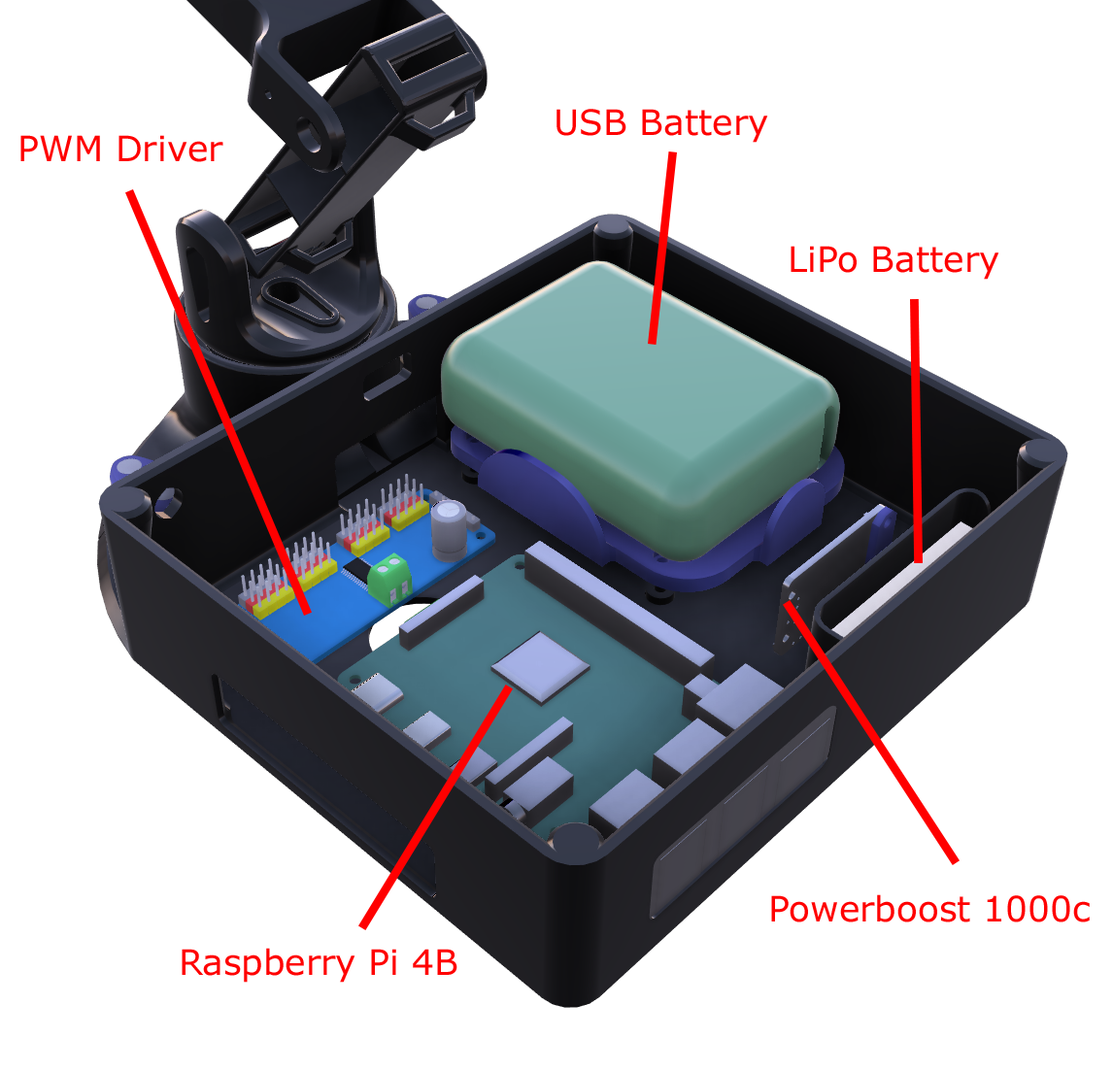
<style>
.page{position:relative;width:1113px;height:1071px;background:#ffffff}
.page>*{position:absolute;margin:0}
.t1{font:35px "Verdana";color:#ff0000}
</style>
<div class="page">
<p class="t1" style="left:557px;top:109px;width:211px;height:34px">USB Battery</p>
<p class="t1" style="left:20px;top:135px;width:203px;height:27px">PWM Driver</p>
<p class="t1" style="left:791px;top:246px;width:208px;height:34px">LiPo Battery</p>
<p class="t1" style="left:771px;top:895px;width:319px;height:28px">Powerboost 1000c</p>
<p class="t1" style="left:182px;top:948px;width:275px;height:35px">Raspberry Pi 4B</p>
</div>
